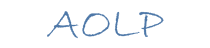
<style>
.page{position:relative;width:210px;height:48px;background:#ffffff}
.page>*{position:absolute;margin:0}
.t1{font:45px "BradleyHandITC";color:#4e78a8}
</style>
<div class="page">
<p class="t1" style="left:47px;top:11px;width:117px;height:28px">AOLP</p>
</div>
